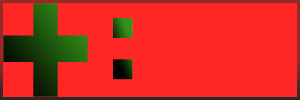
<style>
.page{position:relative;width:300px;height:100px;background:#ff2626}
.page>*{position:absolute;margin:0}
.t1{font:149.5px "BatmanForeverAlternate";letter-spacing:-0.06em;text-transform:uppercase}
</style>
<div class="page">
<p class="t1" style="left:113px;top:18px;width:20px;height:62px">:</p>
</div>
